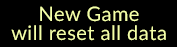
<style>
.page{position:relative;width:177px;height:47px;background:#000000}
.page>*{position:absolute;margin:0}
.t1{font:20px "Lato-Regular";letter-spacing:0.025em;color:#f4ffa8}
</style>
<div class="page">
<p class="t1" style="left:40px;top:6px;width:99px;height:16px">New Game</p>
<p class="t1" style="left:11px;top:25px;width:155px;height:16px">will reset all data</p>
</div>
